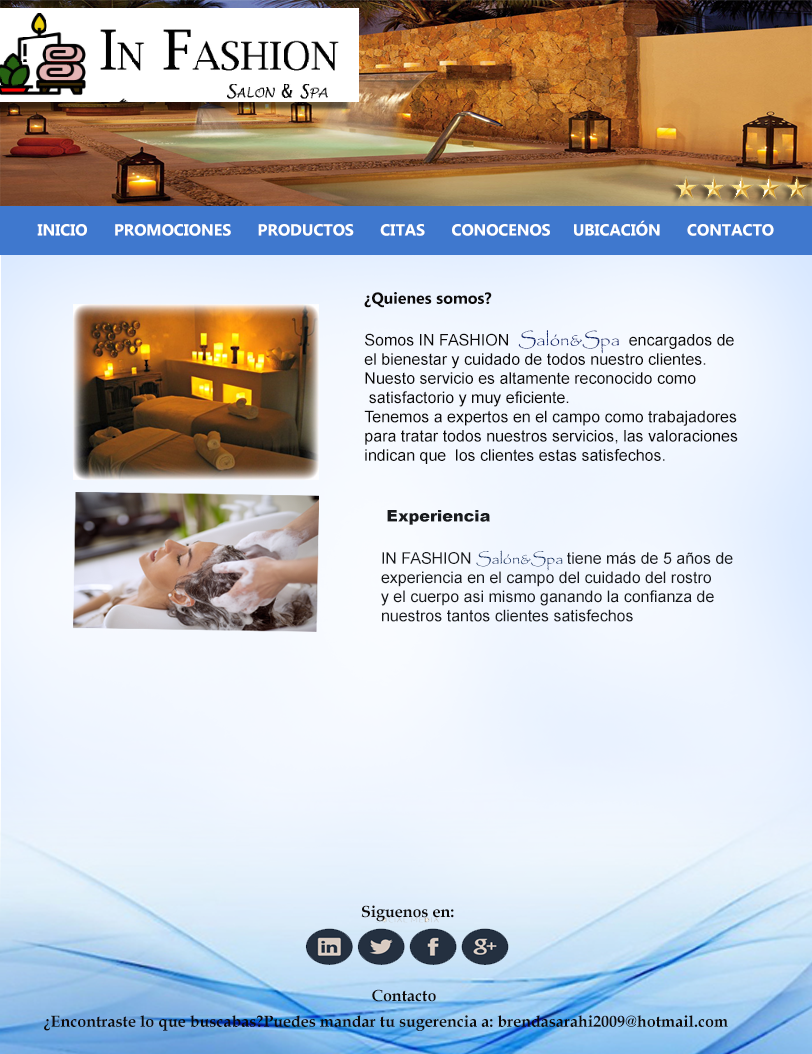
<style>
.page{position:relative;width:812px;height:1054px}
.page>*{position:absolute;margin:0}
.t1{font:16px "MicrosoftTaiLe-Bold";color:#ffffff}
.t2{font:12px "MicrosoftTaiLe-Bold";color:#ffffff}
.t3{font:12px "ArialMT";color:#0c0a0a}
.t4{font:12px "MicrosoftTaiLe-Bold";color:#0c0a0a}
.t5{font:18.7px "Papyrus-Regular";color:#10266c}
.t6{font:12px "Arial-Black";color:#181a1d}
.t7{font:12px "ArialMT";color:#181a1d}
.t8{font:12px "Papyrus-Regular";color:#113365}
.t9{font:12px "BookAntiqua-Bold";color:#0e0b0b}
</style>
<div class="page">
<p class="t1" style="left:37px;top:220px;width:737px;height:16px"><span class="t2">    I</span>NICIO      PROMOCIONES      PRODUCTOS      CITAS      CONOCENOS     UBICACIÓN      CONTACTO</p>
<p class="t3" style="left:364px;top:292px;width:374px;height:172px"><span class="t4">¿Quienes somos?<br><br></span>Somos IN FASHION  <span class="t5">Salón&amp;Spa </span> encargados de<br>el bienestar y cuidado de todos nuestro clientes.<br>Nuesto servicio es altamente reconocido como<br> satisfactorio y muy eficiente.<br>Tenemos a expertos en el campo como trabajadores<br>para tratar todos nuestros servicios, las valoraciones<br>indican que  los clientes estas satisfechos.</p>
<p class="t6" style="left:387px;top:510px;width:103px;height:15px">Experiencia</p>
<p class="t7" style="left:381px;top:550px;width:352px;height:72px">IN FASHION <span class="t8">Salón&amp;Spa </span>tiene más de 5 años de <br>experiencia en el campo del cuidado del rostro<br>y el cuerpo asi mismo ganando la confianza de <br>nuestros tantos clientes satisfechos</p>
<p class="t9" style="left:361px;top:905px;width:93px;height:17px">Siguenos en:</p>
<p class="t9" style="left:372px;top:989px;width:64px;height:13px">Contacto</p>
<p class="t9" style="left:44px;top:1015px;width:684px;height:16px">¿Encontraste lo que buscabas?Puedes mandar tu sugerencia a: brendasarahi2009@hotmail.com</p>
</div>
